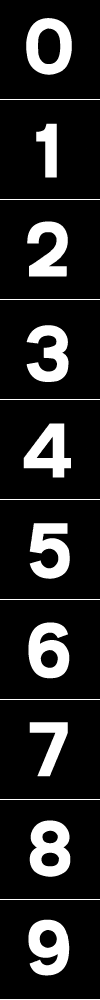
<style>
.page{position:relative;width:100px;height:1000px;background:#000000}
.page>*{position:absolute;margin:0}
.t1{font:72px "Transport-Heavy-Regular";color:#ffffff}
</style>
<div class="page">
<p class="t1" style="left:26px;top:18px;width:46px;height:57px">0</p>
<p class="t1" style="left:36px;top:123px;width:21px;height:55px">1</p>
<p class="t1" style="left:27px;top:221px;width:41px;height:56px">2</p>
<p class="t1" style="left:26px;top:325px;width:43px;height:57px">3</p>
<p class="t1" style="left:23px;top:423px;width:48px;height:55px">4</p>
<p class="t1" style="left:29px;top:523px;width:41px;height:56px">5</p>
<p class="t1" style="left:28px;top:622px;width:42px;height:57px">6</p>
<p class="t1" style="left:29px;top:722px;width:39px;height:55px">7</p>
<p class="t1" style="left:29px;top:820px;width:42px;height:57px">8</p>
<p class="t1" style="left:28px;top:919px;width:42px;height:57px">9</p>
</div>
